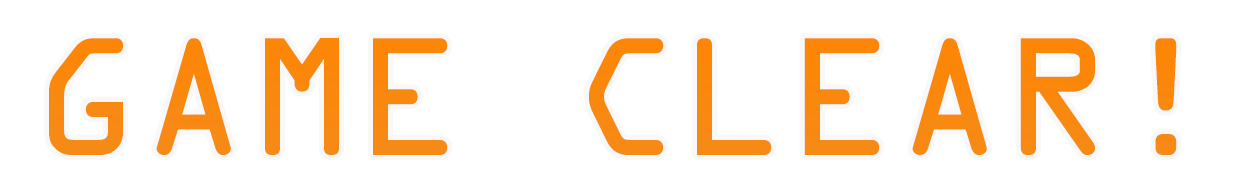
<style>
.page{position:relative;width:1252px;height:192px;background:#ffffff}
.page>*{position:absolute;margin:0}
.t1{font:150px "OCRAStd";color:#f68a16}
</style>
<div class="page">
<p class="t1" style="left:49px;top:38px;width:1128px;height:117px">GAME CLEAR!</p>
</div>
